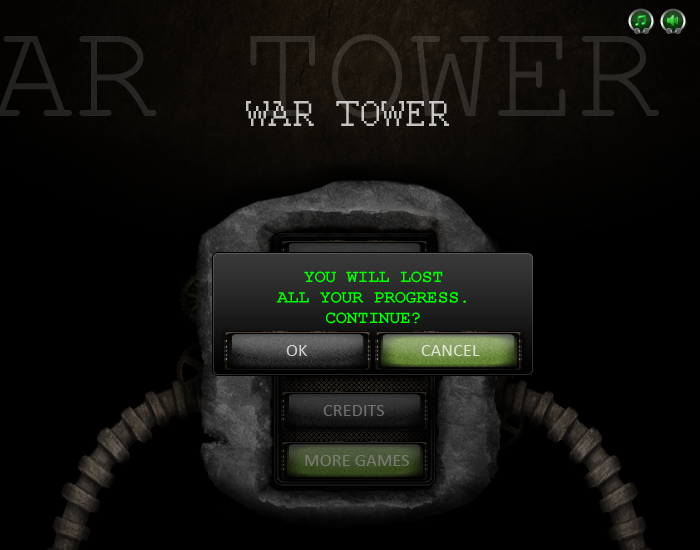
<style>
.page{position:relative;width:700px;height:550px;background:#000000}
.page>*{position:absolute;margin:0}
.t1{font:17.8px "CourierNewPS-BoldMT";color:#00ff00}
.t2{font:18.3px "Calibri";color:#d1d1d1}
.t3{font:18.3px "Calibri";color:#dfe6d4}
.t4{font:18.3px "Calibri";color:#727272}
.t5{font:18.3px "Calibri";color:#787c73}
</style>
<div class="page">
<p class="t1" style="left:276px;top:271px;width:190px;height:53px;text-align:center">YOU WILL LOST<br>ALL YOUR PROGRESS.<br>CONTINUE?</p>
<p class="t2" style="left:286px;top:345px;width:21px;height:11px">OK</p>
<p class="t3" style="left:421px;top:345px;width:59px;height:11px">CANCEL</p>
<p class="t4" style="left:323px;top:405px;width:61px;height:11px">CREDITS</p>
<p class="t5" style="left:305px;top:455px;width:104px;height:11px">MORE GAMES</p>
</div>
